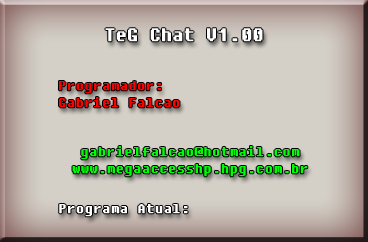
<style>
.page{position:relative;width:368px;height:242px;background:#d4d0c8}
.page>*{position:absolute;margin:0}
.t1{font:18px "Fixedsys";color:#ffffff;font-weight:bold}
.t2{font:14px "Fixedsys";color:#ff0000;font-weight:bold}
.t3{font:14px "Fixedsys";color:#00ff06;font-weight:bold}
.t4{font:14px "Fixedsys";color:#ffffff;font-weight:bold}
</style>
<div class="page">
<p class="t1" style="left:105px;top:28px;width:158px;height:14px">TeG Chat V1.00</p>
<p class="t2" style="left:59px;top:81px;width:121px;height:27px">Programador:<br>Gabriel Falcao</p>
<p class="t3" style="left:72px;top:146px;width:236px;height:31px;text-align:center">gabrielfalcao@hotmail.com<br>www.megaaccesshp.hpg.com.br</p>
<p class="t4" style="left:59px;top:204px;width:129px;height:13px">Programa Atual:</p>
</div>
